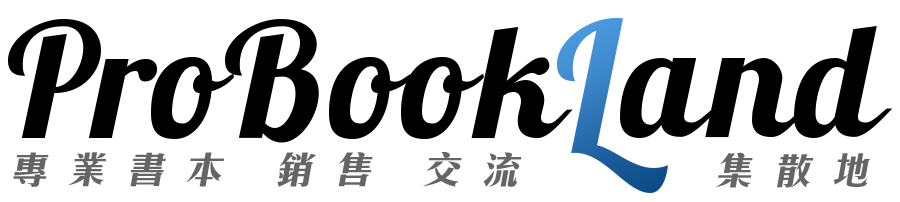
<style>
.page{position:relative;width:900px;height:202px;background:#ffffff}
.page>*{position:absolute;margin:0}
.t1{font:158.8px "Lobster1.3";letter-spacing:0.025em;color:#000000}
.t2{font:177.5px "Lobster1.3";letter-spacing:0.025em;scale:0.95 1}
.t3{font:38px "CHei3HK-Bold";letter-spacing:0.54em;color:#4d4d4d;font-style:italic}
</style>
<div class="page">
<p class="t1" style="left:8px;top:19px;width:565px;height:124px">ProBook</p>
<p class="t2" style="left:557px;top:18px;width:111px;height:175px">L</p>
<p class="t1" style="left:620px;top:26px;width:273px;height:112px">and</p>
<p class="t3" style="left:13px;top:152px;width:509px;height:35px">專業書本 銷售 交流</p>
<p class="t3" style="left:716px;top:152px;width:154px;height:36px">集散地</p>
</div>
